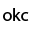
<style>
.page{position:relative;width:32px;height:32px;background:#ffffff}
.page>*{position:absolute;margin:0}
.t1{font:18px "MyriadPro-Regular";color:#000000}
</style>
<div class="page">
<p class="t1" style="left:3px;top:8px;width:26px;height:13px">okc</p>
</div>
